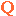
<style>
.page{position:relative;width:16px;height:16px;background:#ffffff}
.page>*{position:absolute;margin:0}
.t1{font:18.7px "TimesNewRomanPS-BoldMT";color:#ff6633}
</style>
<div class="page">
<p class="t1" style="left:1px;top:1px;width:13px;height:15px">Q</p>
</div>
